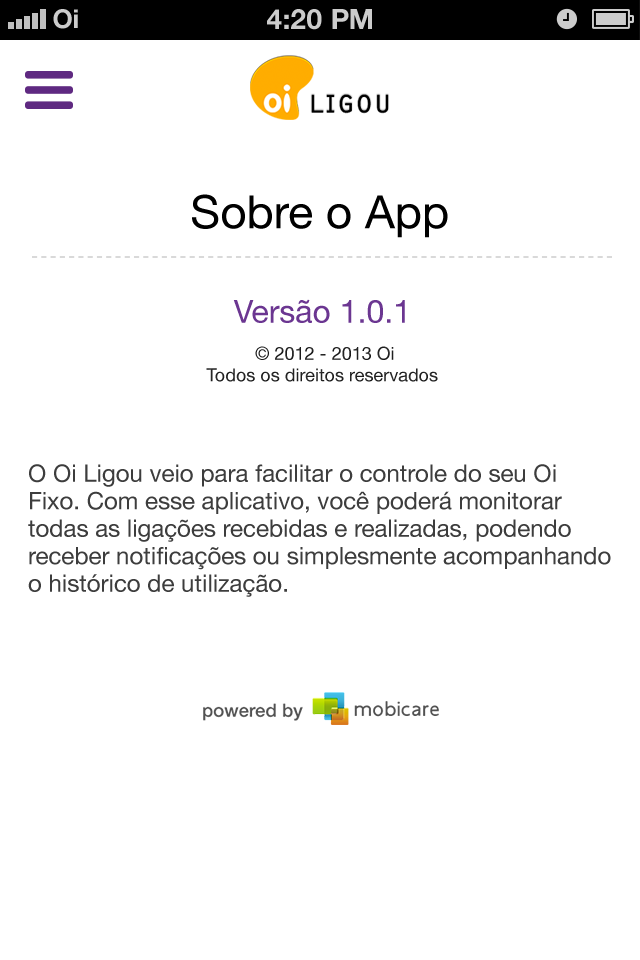
<style>
.page{position:relative;width:640px;height:960px;background:#ffffff}
.page>*{position:absolute;margin:0}
.t1{font:26px "HelveticaNeue-Bold";color:#cccccc}
.t2{font:28px "HelveticaNeue-Bold";color:#cccccc;text-transform:uppercase}
.t3{font:46px "HelveticaNeue-Roman";color:#000000}
.t4{font:32px "HelveticaNeue-Roman";color:#6b3691}
.t5{font:18px "HelveticaNeue";color:#212121}
.t6{font:24px/27.5px "HelveticaNeue-Roman";color:#3d3d3d}
</style>
<div class="page">
<p class="t1" style="left:53px;top:9px;width:25px;height:20px">Oi</p>
<p class="t2" style="left:267px;top:9px;width:105px;height:21px">4:20 pM</p>
<p class="t3" style="left:192px;top:194px;width:256px;height:44px">Sobre o App</p>
<p class="t4" style="left:233px;top:299px;width:172px;height:24px">Versão 1.0.1</p>
<p class="t5" style="left:206px;top:346px;width:232px;height:36px;text-align:center">© 2012 - 2013 Oi<br>Todos os direitos reservados</p>
<p class="t6" style="left:28px;top:464px;width:583px;height:133px">O Oi Ligou veio para facilitar o controle do seu Oi Fixo. Com esse aplicativo, você poderá monitorar todas as ligações recebidas e realizadas, podendo receber notificações ou simplesmente acompanhando o histórico de utilização.</p>
</div>
